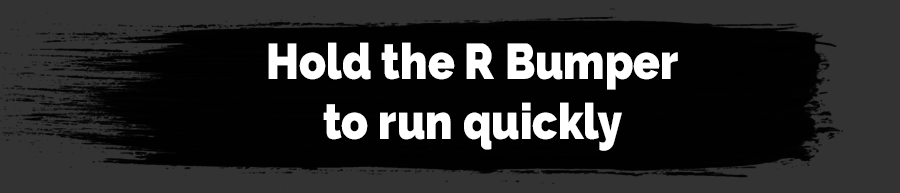
<style>
.page{position:relative;width:900px;height:193px;background:#010101}
.page>*{position:absolute;margin:0}
.t1{font:50px "Raleway-Heavy";color:#ffffff;scale:0.88 1}
</style>
<div class="page">
<p class="t1" style="left:268px;top:42px;width:410px;height:109px;text-align:center">Hold the R Bumper<br>to run quickly</p>
</div>
